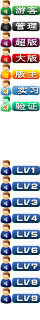
<style>
.page{position:relative;width:40px;height:320px;background:#ffffff}
.page>*{position:absolute;margin:0}
.t1{font:8px "SimSun";letter-spacing:0.08em;color:#ffffff;scale:1.37 1}
.t2{font:8px "TAPEMAN";letter-spacing:0.08em;color:#ffffff;scale:1.37 1}
</style>
<div class="page">
<p class="t1" style="left:15px;top:6px;width:23px;height:8px">游客</p>
<p class="t1" style="left:15px;top:22px;width:23px;height:8px">管理</p>
<p class="t1" style="left:15px;top:38px;width:23px;height:8px">超版</p>
<p class="t1" style="left:15px;top:54px;width:23px;height:8px">大版</p>
<p class="t1" style="left:15px;top:70px;width:23px;height:8px">版主</p>
<p class="t1" style="left:17px;top:86px;width:22px;height:8px">实习</p>
<p class="t1" style="left:15px;top:102px;width:23px;height:8px">验证</p>
<p class="t2" style="left:16px;top:167px;width:19px;height:7px">LV1</p>
<p class="t2" style="left:16px;top:183px;width:22px;height:7px">LV2</p>
<p class="t2" style="left:16px;top:199px;width:22px;height:7px">LV3</p>
<p class="t2" style="left:16px;top:215px;width:22px;height:7px">LV4</p>
<p class="t2" style="left:16px;top:231px;width:22px;height:7px">LV5</p>
<p class="t2" style="left:16px;top:247px;width:22px;height:7px">LV6</p>
<p class="t2" style="left:16px;top:263px;width:22px;height:7px">LV7</p>
<p class="t2" style="left:16px;top:279px;width:22px;height:7px">LV8</p>
<p class="t2" style="left:16px;top:295px;width:22px;height:7px">LV9</p>
</div>
